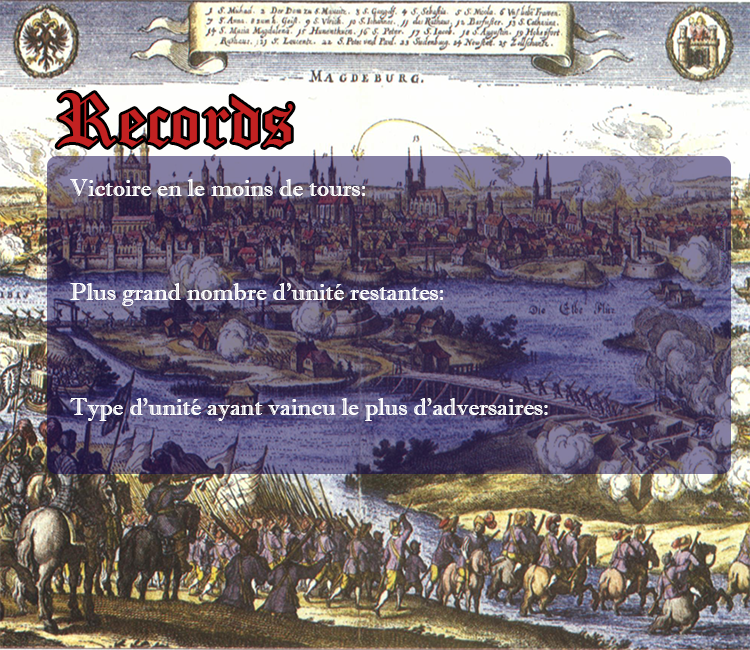
<style>
.page{position:relative;width:750px;height:650px}
.page>*{position:absolute;margin:0}
.t1{font:72px "OldEnglishTextMT";color:#c22121}
.t2{font:24px "ImprintMT-Shadow";color:#ffffff}
</style>
<div class="page">
<p class="t1" style="left:57px;top:93px;width:236px;height:54px">Records</p>
<p class="t2" style="left:70px;top:179px;width:295px;height:17px">Victoire en le moins de tours:</p>
<p class="t2" style="left:70px;top:283px;width:373px;height:23px">Plus grand nombre d’unité restantes:</p>
<p class="t2" style="left:70px;top:398px;width:478px;height:23px">Type d’unité ayant vaincu le plus d’adversaires:</p>
</div>
